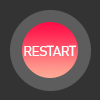
<style>
.page{position:relative;width:100px;height:100px;background:#333333}
.page>*{position:absolute;margin:0}
.t1{font:14.4px "Bahnschrift";letter-spacing:-0.08em;color:#ffffff}
</style>
<div class="page">
<p class="t1" style="left:24px;top:45px;width:53px;height:12px">RESTART</p>
</div>
